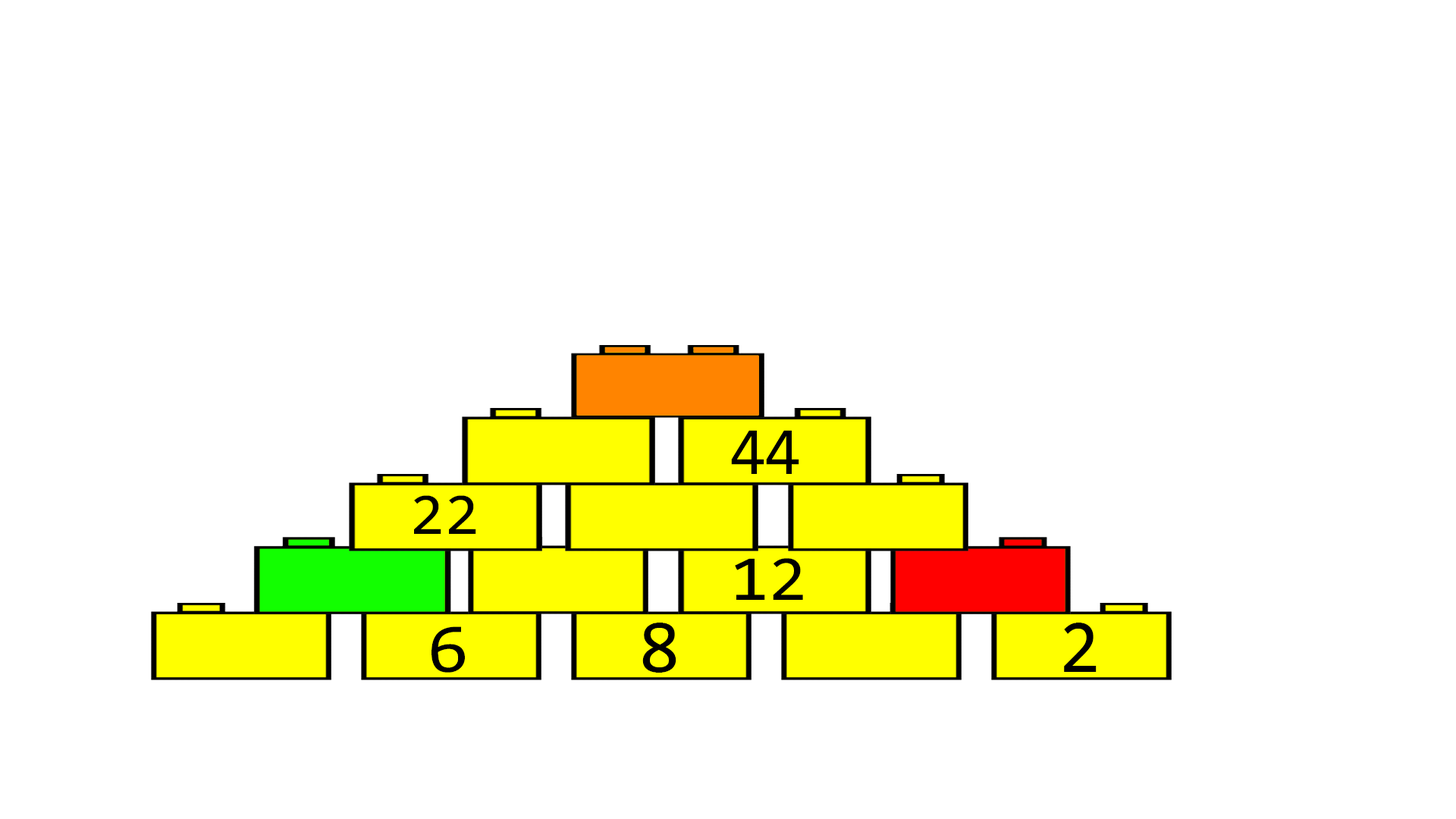
<style>
.page{position:relative;width:1456px;height:819px;background:#ffffff}
.page>*{position:absolute;margin:0}
.t1{font:68px "Consolas";color:#000000;scale:0.94 1}
.t2{font:59.4px "Consolas";color:#000000;scale:1.07 1}
.t3{font:64.3px "Consolas";color:#000000;scale:1.09 1}
.t4{font:70.6px "Consolas";color:#000000;scale:1.07 1}
.t5{font:75.8px "Consolas";color:#000000}
</style>
<div class="page">
<p class="t1" style="left:731px;top:430px;width:68px;height:44px">44</p>
<p class="t2" style="left:414px;top:495px;width:62px;height:39px">22</p>
<p class="t3" style="left:735px;top:558px;width:68px;height:42px">12</p>
<p class="t4" style="left:431px;top:626px;width:34px;height:47px">6</p>
<p class="t5" style="left:642px;top:623px;width:34px;height:50px">8</p>
<p class="t5" style="left:1064px;top:623px;width:33px;height:49px">2</p>
</div>
